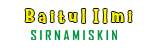
<style>
.page{position:relative;width:153px;height:49px;background:#ffffff}
.page>*{position:absolute;margin:0}
.t1{font:18.9px "Nilky&Miky";color:#fff502}
</style>
<div class="page">
<p class="t1" style="left:25px;top:9px;width:107px;height:14px">B a i t u l  I l m i</p>
</div>
